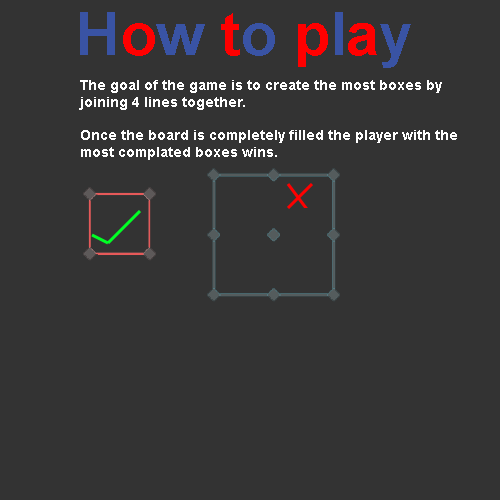
<style>
.page{position:relative;width:500px;height:500px;background:#333333}
.page>*{position:absolute;margin:0}
.t1{font:60px "Arial-BoldMT";color:#3953a4}
.t2{font:60px "Arial-BoldMT";color:#ff0000}
.t3{font:14px "Arial-BoldMT";color:#ffffff}
</style>
<div class="page">
<p class="t1" style="left:80px;top:12px;width:331px;height:56px">H<span class="t2">o</span>w <span class="t2">t</span>o <span class="t2">p</span>l<span class="t2">a</span>y</p>
<p class="t3" style="left:79px;top:80px;width:378px;height:80px">The goal of the game is to create the most boxes by <br>joining 4 lines together. <br><br>Once the board is completely filled the player with the <br>most complated boxes wins.</p>
</div>
